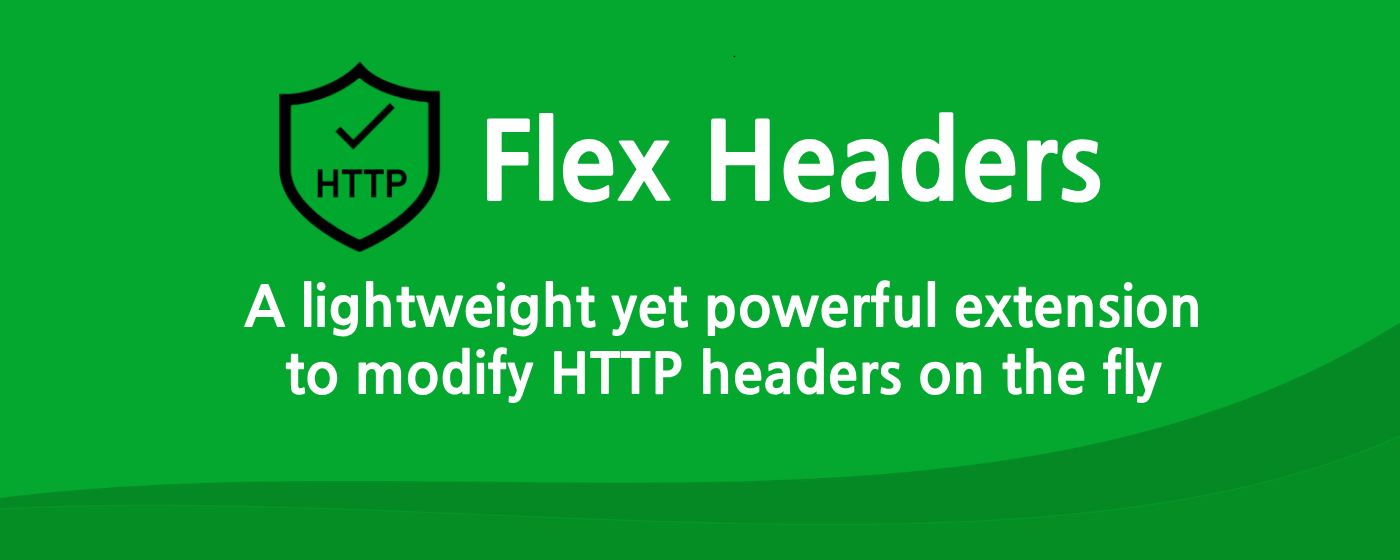
<style>
.page{position:relative;width:1400px;height:560px;background:#05a82e}
.page>*{position:absolute;margin:0}
.t1{font:107px "NanumGothicExtraBold";color:#ffffff}
.t2{font:56px "NanumGothicExtraBold";color:#ffffff}
</style>
<div class="page">
<p class="t1" style="left:487px;top:112px;width:614px;height:91px">Flex Headers</p>
<p class="t2" style="left:244px;top:280px;width:954px;height:124px;text-align:center">A lightweight yet powerful extension<br>to modify HTTP headers on the fly</p>
</div>
